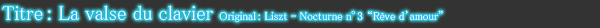
<style>
.page{position:relative;width:600px;height:28px;background:#333333}
.page>*{position:absolute;margin:0}
.t1{font:11.2px "MS-PMincho";color:#ffffff}
.t2{font:20px "MS-PMincho";color:#ffffff}
.t3{font:11.2px "MS-PMincho";letter-spacing:-0.5em;color:#ffffff}
</style>
<div class="page">
<p class="t1" style="left:2px;top:5px;width:441px;height:17px"><span class="t2">Titre : La valse du clavier </span>Original : Liszt - Nocturne n<span class="t3">°3</span>   “Rêve d’amour”</p>
</div>
